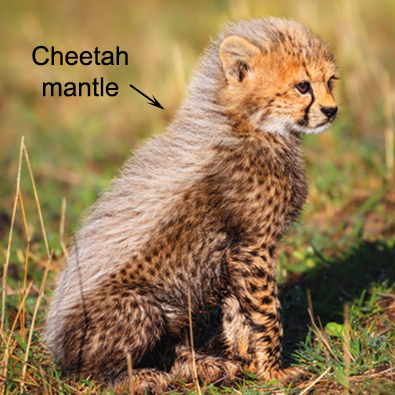
<style>
.page{position:relative;width:395px;height:395px}
.page>*{position:absolute;margin:0}
.t1{font:26px "ArialMT";color:#000000}
</style>
<div class="page">
<p class="t1" style="left:32px;top:45px;width:96px;height:52px;text-align:center">Cheetah<br>mantle</p>
</div>
